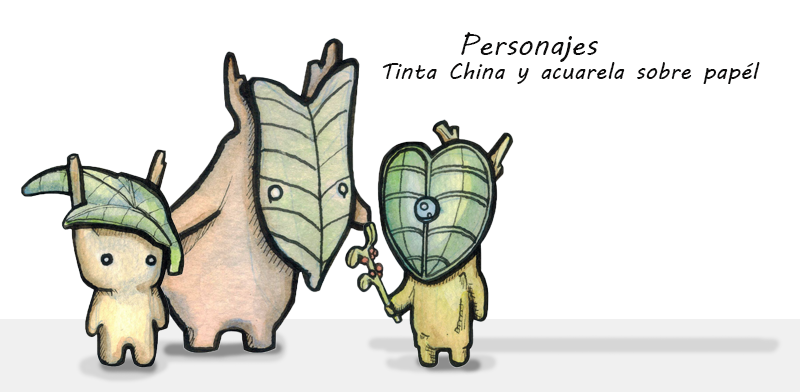
<style>
.page{position:relative;width:800px;height:392px;background:#ffffff}
.page>*{position:absolute;margin:0}
.t1{font:29.3px "MVBoli";color:#0e0d0d}
.t2{font:23.3px "MVBoli";color:#0e0d0d}
</style>
<div class="page">
<p class="t1" style="left:461px;top:32px;width:137px;height:30px">Personajes</p>
<p class="t2" style="left:382px;top:62px;width:378px;height:22px">Tinta China y acuarela sobre papél</p>
</div>
